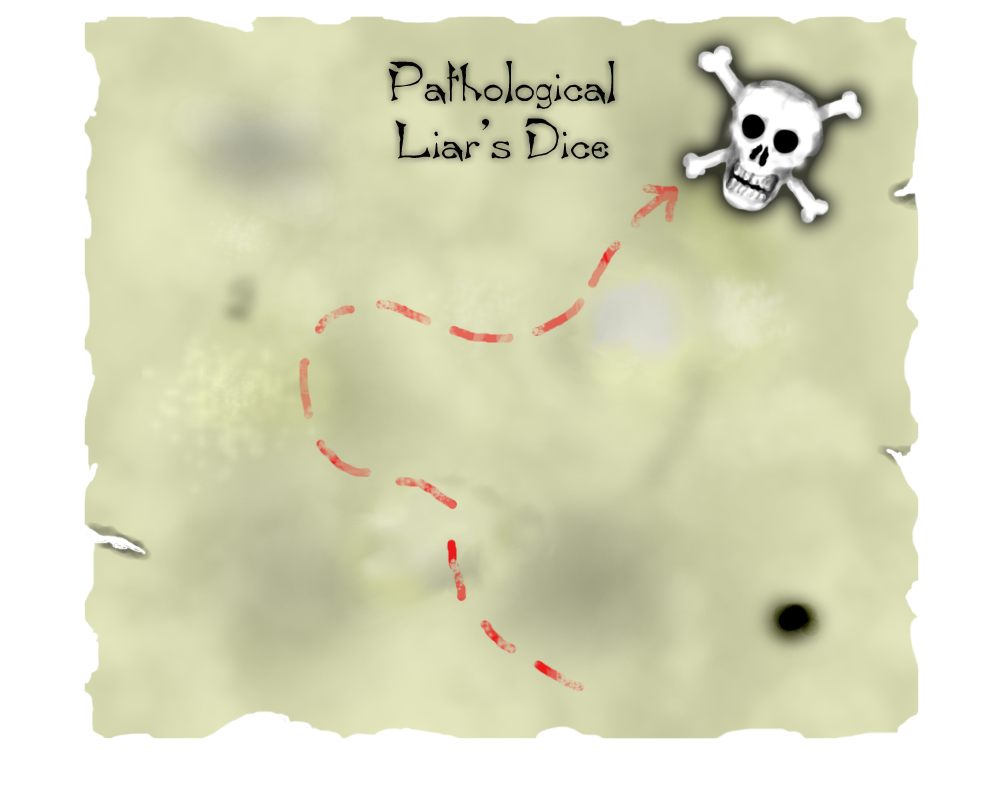
<style>
.page{position:relative;width:1000px;height:800px;background:#ffffff}
.page>*{position:absolute;margin:0}
.t1{font:48px "Bard";color:#040404}
</style>
<div class="page">
<p class="t1" style="left:388px;top:61px;width:227px;height:101px;text-align:center">Pathological<br>Liar’s Dice</p>
</div>
